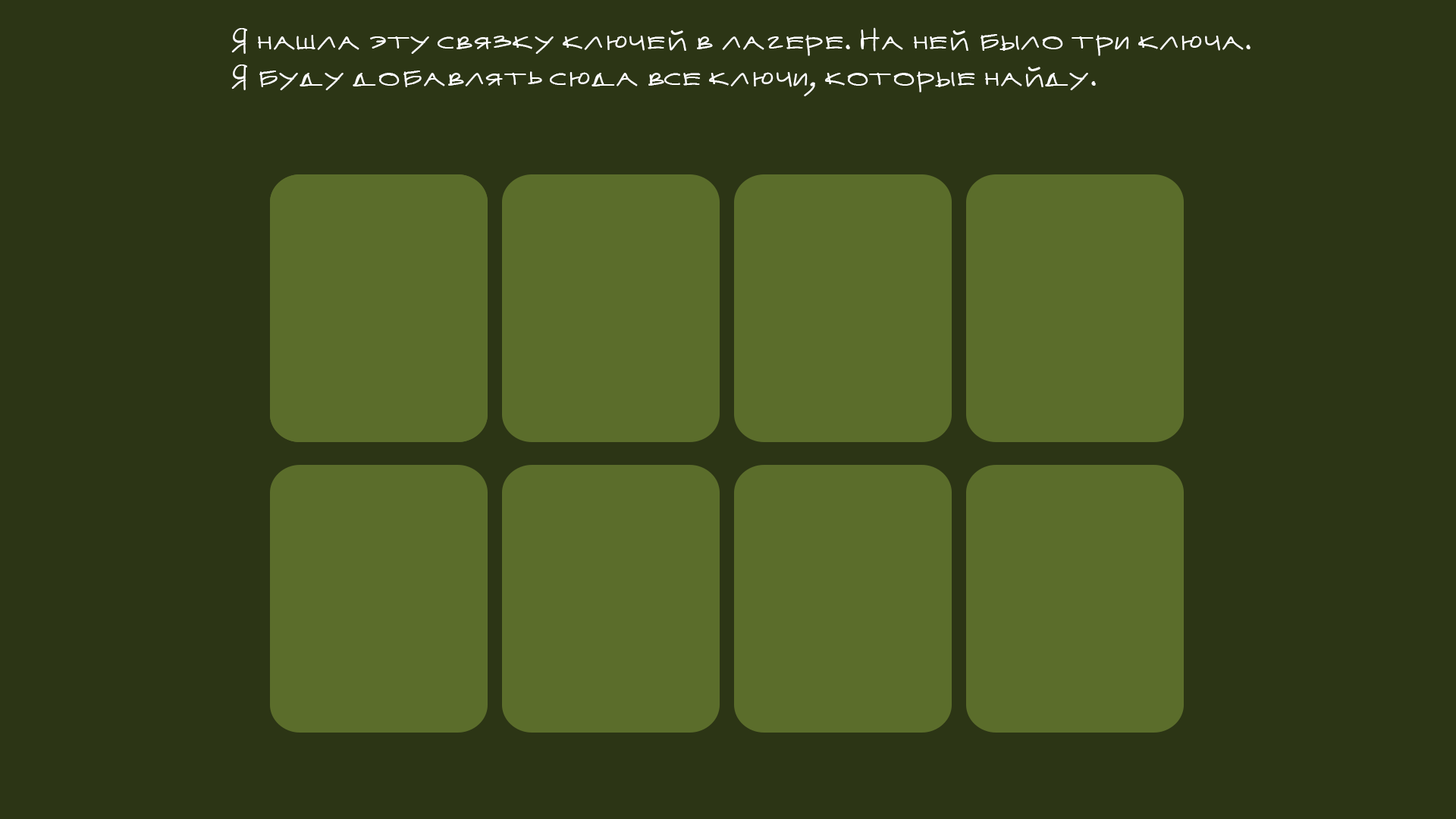
<style>
.page{position:relative;width:1456px;height:819px;background:#2c3515}
.page>*{position:absolute;margin:0}
.t1{font:26.4px/36.4px "Mateur";color:#ffffff;scale:0.97 1}
</style>
<div class="page">
<p class="t1" style="left:231px;top:27px;width:1019px;height:69px">Я нашла эту связку ключей в лагере. На ней было три ключа. <br>Я буду добавлять сюда все ключи, которые найду.</p>
</div>
